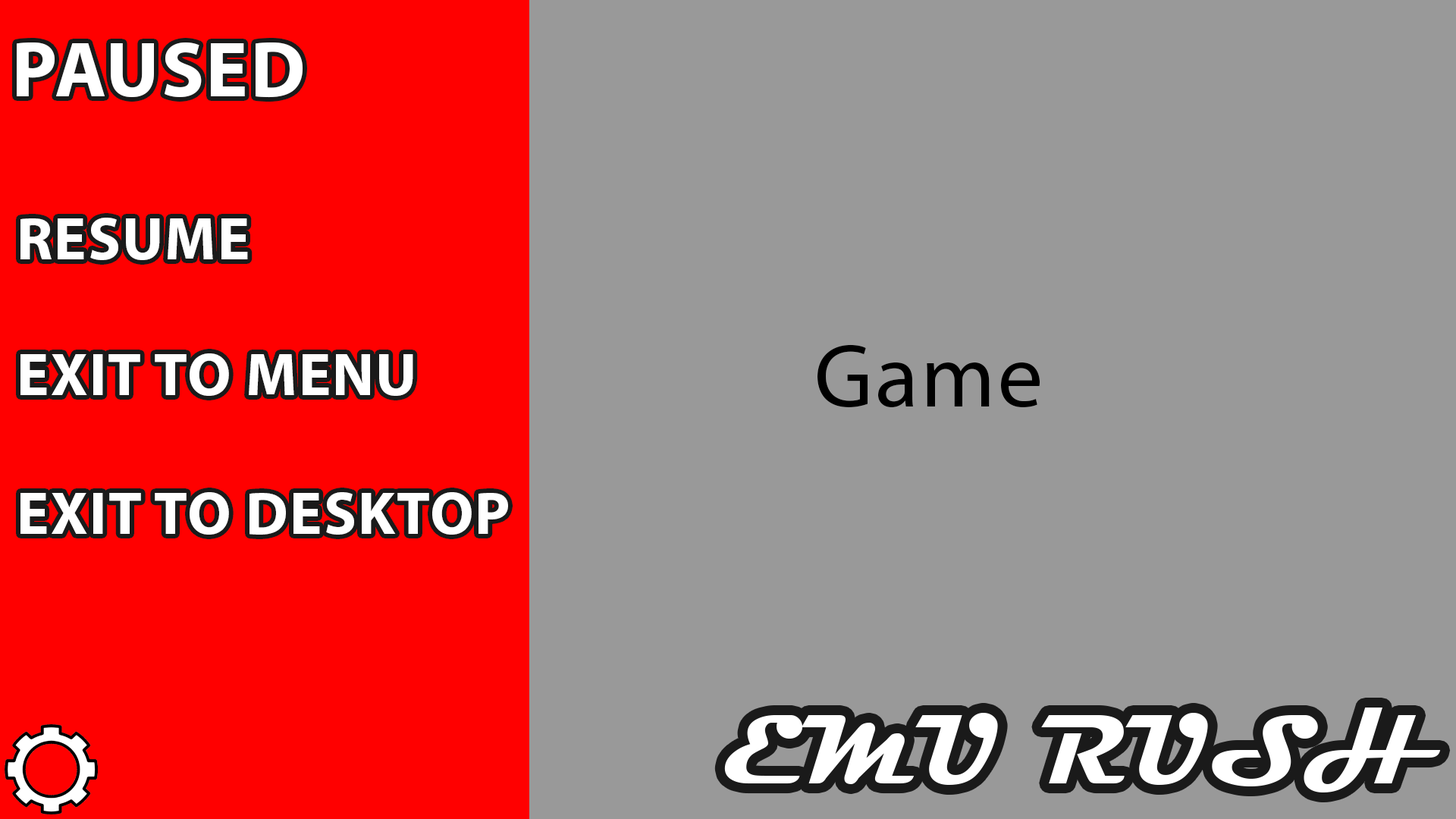
<style>
.page{position:relative;width:1456px;height:819px;background:#999999}
.page>*{position:absolute;margin:0}
.t1{font:79px "MyriadPro-Bold";letter-spacing:0.025em;color:#ffffff}
.t2{font:60.6px "MyriadPro-Bold";letter-spacing:0.025em;color:#ffffff}
.t3{font:89.8px "MyriadPro-Regular";letter-spacing:0.025em;color:#000000}
.t4{font:99.4px "Magneto-Bold";letter-spacing:0.025em;color:#ffffff}
</style>
<div class="page">
<p class="t1" style="left:17px;top:42px;width:286px;height:56px">PAUSED</p>
<p class="t2" style="left:20px;top:218px;width:228px;height:42px">RESUME</p>
<p class="t2" style="left:20px;top:353px;width:393px;height:43px">EXIT TO MENU</p>
<p class="t3" style="left:817px;top:344px;width:223px;height:64px">Game</p>
<p class="t2" style="left:20px;top:492px;width:488px;height:43px">EXIT TO DESKTOP</p>
<p class="t4" style="left:724px;top:708px;width:717px;height:84px">EMU RUSH</p>
</div>
